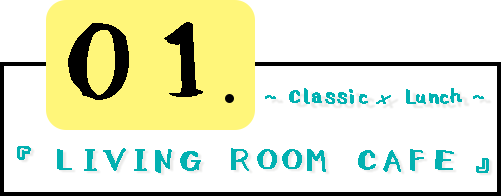
<style>
.page{position:relative;width:501px;height:196px;background:#ffffff}
.page>*{position:absolute;margin:0}
.t1{font:140px "001Shirokuma-Regular";letter-spacing:-0.36em;color:#000000}
.t2{font:140px "KozGoPr6N-Regular";letter-spacing:-0.36em;color:#000000}
.t3{font:24px "001Shirokuma-Regular";letter-spacing:-0.56em;color:#02b1b1;font-weight:bold}
.t4{font:24px "SnellRoundhand";letter-spacing:-0.56em;color:#02b1b1;font-weight:bold}
.t5{font:36px "001Shirokuma-Regular";letter-spacing:-0.32em;color:#02b1b1;font-weight:bold}
</style>
<div class="page">
<p class="t1" style="left:68px;top:23px;width:61px;height:77px">0</p>
<p class="t1" style="left:164px;top:22px;width:39px;height:75px"><span class="t2">　</span>1</p>
<p class="t3" style="left:265px;top:88px;width:219px;height:16px">~ Classic <span class="t4">×</span>  Lunch ~</p>
<p class="t5" style="left:17px;top:146px;width:472px;height:27px">『 LIVING ROOM CAFE 』</p>
</div>
